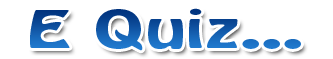
<style>
.page{position:relative;width:333px;height:59px;background:#ffffff}
.page>*{position:absolute;margin:0}
.t1{font:45.9px "HoboStd";scale:1.6 1}
</style>
<div class="page">
<p class="t1" style="left:30px;top:8px;width:271px;height:43px">E Quiz...</p>
</div>
